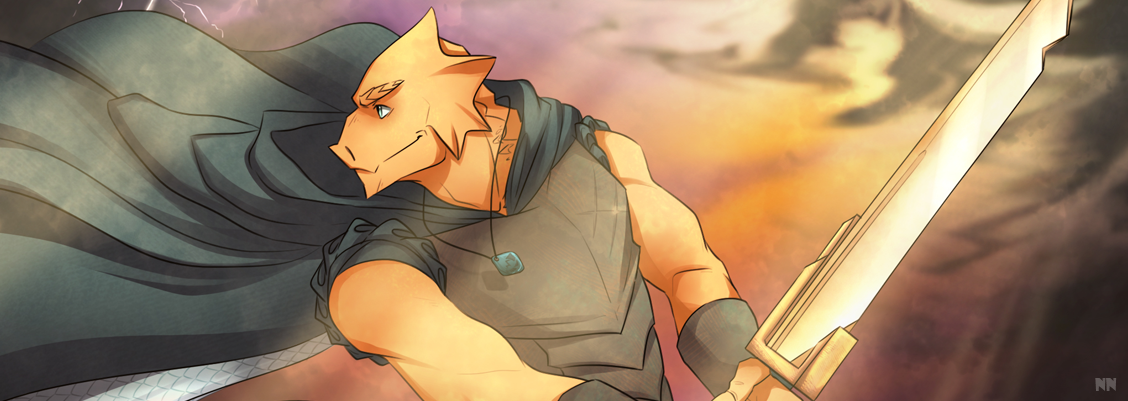
<style>
.page{position:relative;width:1128px;height:401px}
.page>*{position:absolute;margin:0}
.t1{font:16.7px "ShowcardGothic-Reg";color:#5f5857}
</style>
<div class="page">
<p class="t1" style="left:1095px;top:378px;width:22px;height:13px">NN</p>
</div>
